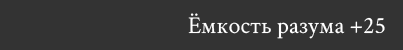
<style>
.page{position:relative;width:403px;height:50px;background:#333333}
.page>*{position:absolute;margin:0}
.t1{font:24px "CrimsonText-Regular";color:#ffffff}
</style>
<div class="page">
<p class="t1" style="left:188px;top:13px;width:197px;height:26px">Ёмкость разума +25</p>
</div>
